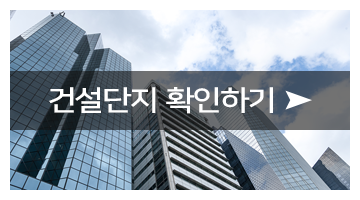
<style>
.page{position:relative;width:360px;height:200px}
.page>*{position:absolute;margin:0}
.t1{font:27.8px "NanumSquare_acB";letter-spacing:-0.01em;color:#ffffff;scale:1.17 1}
</style>
<div class="page">
<p class="t1" style="left:49px;top:87px;width:224px;height:27px">건설단지 확인하기</p>
</div>
